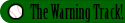
<style>
.page{position:relative;width:125px;height:23px;background:#006600}
.page>*{position:absolute;margin:0}
.t1{font:20px "Birch";color:#000000}
</style>
<div class="page">
<p class="t1" style="left:30px;top:4px;width:94px;height:18px">The Warning Track!</p>
</div>
